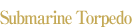
<style>
.page{position:relative;width:133px;height:27px;background:#ffffff}
.page>*{position:absolute;margin:0}
.t1{font:18px "RyuminPro-ExBold";letter-spacing:-0.08em;color:#c4a956;scale:0.9 1}
</style>
<div class="page">
<p class="t1" style="left:0px;top:10px;width:132px;height:17px">Submarine Torpedo</p>
</div>
